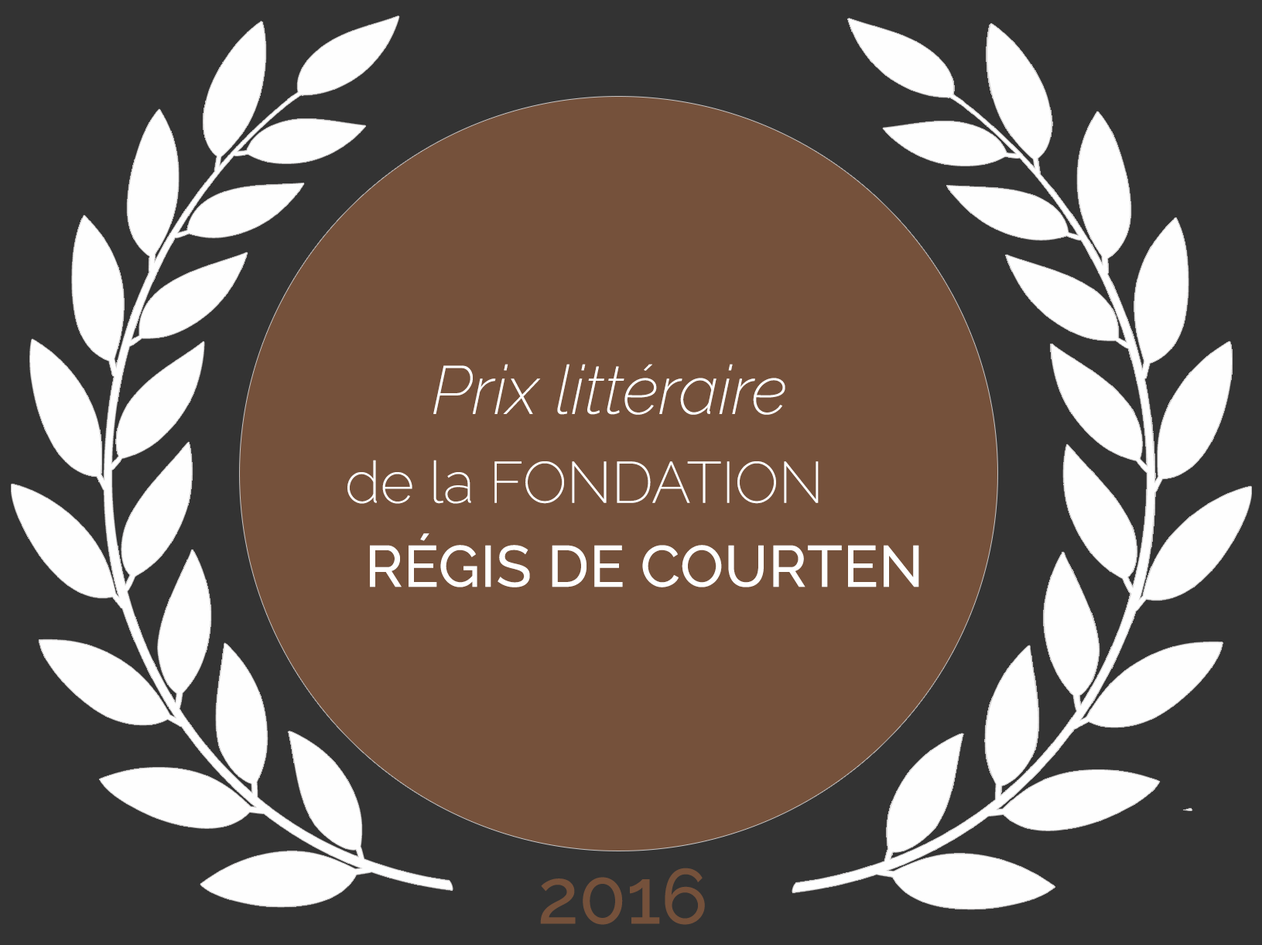
<style>
.page{position:relative;width:1262px;height:945px;background:#333333}
.page>*{position:absolute;margin:0}
.t1{font:67.7px "Raleway-ExtraLightItalic";color:#ffffff}
.t2{font:58px "Raleway-ExtraLight";color:#ffffff;text-transform:uppercase}
.t3{font:58px "Raleway-ExtraLight";color:#ffffff}
.t4{font:58px "Raleway-Medium";letter-spacing:0.01em;color:#ffffff;text-transform:uppercase}
.t5{font:77.4px "Raleway-Medium";color:#75513b;text-transform:uppercase}
</style>
<div class="page">
<p class="t1" style="left:433px;top:364px;width:352px;height:51px">Prix littéraire</p>
<p class="t2" style="left:347px;top:460px;width:472px;height:44px"><span class="t3">de la</span> FONDATION</p>
<p class="t4" style="left:370px;top:533px;width:549px;height:54px">RéGIS DE COURTEN</p>
<p class="t5" style="left:540px;top:867px;width:165px;height:58px">2016</p>
</div>
